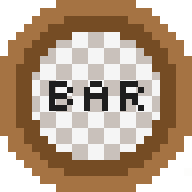
<style>
.page{position:relative;width:192px;height:192px;background:#a57343}
.page>*{position:absolute;margin:0}
.t1{font:50px "Silkscreen";color:#1e1e1e}
</style>
<div class="page">
<p class="t1" style="left:49px;top:81px;width:95px;height:30px">BAR</p>
</div>
